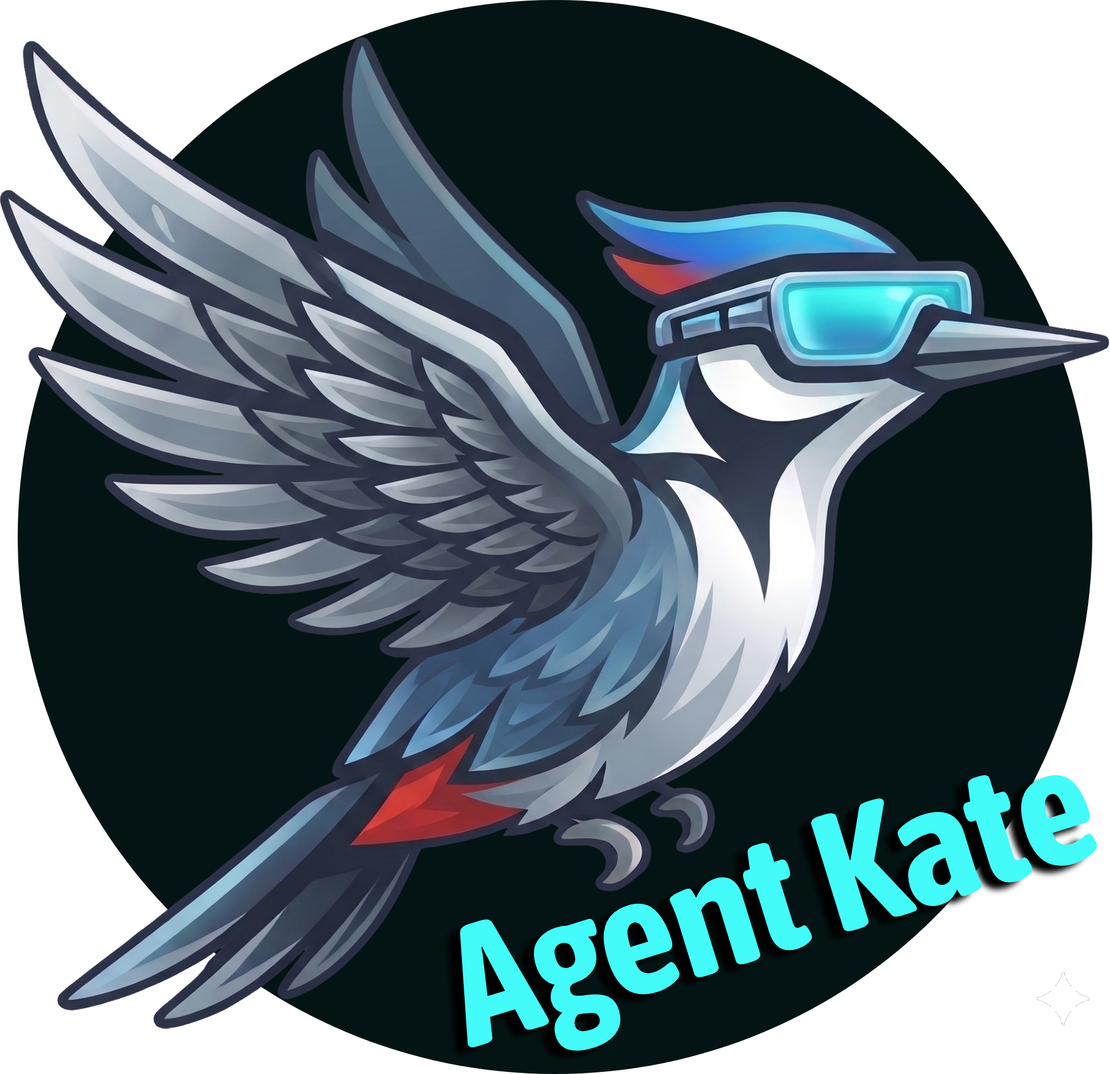
<style>
.page{position:relative;width:1110px;height:1074px;background:#041414}
.page>*{position:absolute;margin:0}
.t1{font:169.5px "AsapCondensed-Bold";color:#43fbf8}
</style>
<div class="page">
<p class="t1" style="left:460px;top:775px;width:637px;height:276px;rotate:-17deg">Agent Kate</p>
</div>
